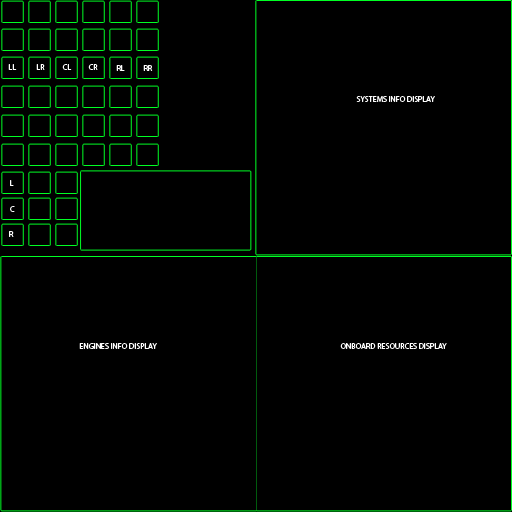
<style>
.page{position:relative;width:512px;height:512px;background:#000000}
.page>*{position:absolute;margin:0}
.t1{font:8px "MyriadPro-Regular";color:#ffffff}
</style>
<div class="page">
<p class="t1" style="left:8px;top:64px;width:9px;height:6px">LL</p>
<p class="t1" style="left:36px;top:64px;width:9px;height:6px">LR</p>
<p class="t1" style="left:62px;top:64px;width:10px;height:6px">CL</p>
<p class="t1" style="left:88px;top:64px;width:10px;height:6px">CR</p>
<p class="t1" style="left:116px;top:65px;width:9px;height:6px">RL</p>
<p class="t1" style="left:143px;top:65px;width:10px;height:6px">RR</p>
<p class="t1" style="left:356px;top:96px;width:79px;height:6px">SYSTEMS INFO DISPLAY</p>
<p class="t1" style="left:10px;top:180px;width:4px;height:6px">L</p>
<p class="t1" style="left:10px;top:206px;width:5px;height:6px">C</p>
<p class="t1" style="left:9px;top:231px;width:5px;height:6px">R</p>
<p class="t1" style="left:79px;top:343px;width:78px;height:6px">ENGINES INFO DISPLAY</p>
<p class="t1" style="left:340px;top:343px;width:107px;height:6px">ONBOARD RESOURCES DISPLAY</p>
</div>
